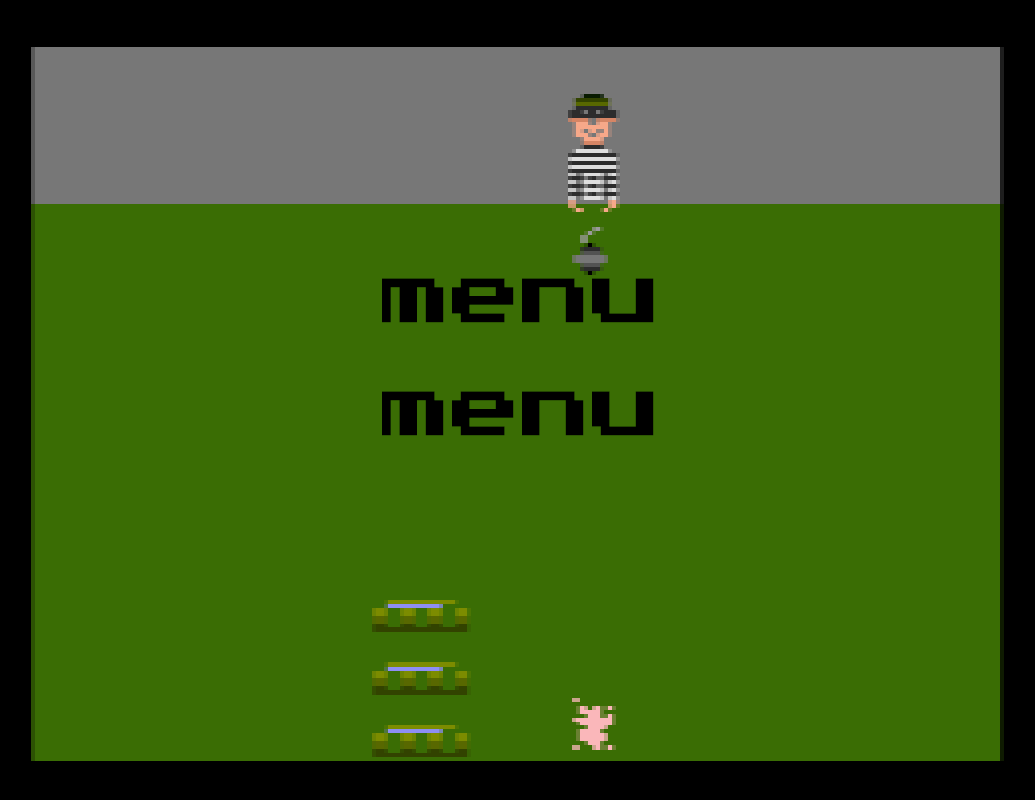
<style>
.page{position:relative;width:1035px;height:800px;background:#3a6d04}
.page>*{position:absolute;margin:0}
.t1{font:120px "PressStart2P";color:#000000}
</style>
<div class="page">
<p class="t1" style="left:382px;top:278px;width:272px;height:45px">menu</p>
<p class="t1" style="left:382px;top:391px;width:272px;height:45px">menu</p>
</div>
